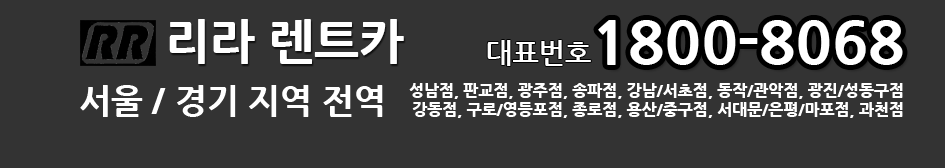
<style>
.page{position:relative;width:945px;height:168px;background:#333333}
.page>*{position:absolute;margin:0}
.t1{font:48px "NanumGothicExtraBold";color:#ffffff}
.t2{font:60px "NanumGothicExtraBold";color:#ffffff}
.t3{font:28px "NanumGothicBold";color:#ffffff}
.t4{font:34px "NanumGothicExtraBold";color:#ffffff}
.t5{font:16px "NanumGothicExtraBold";color:#ffffff}
</style>
<div class="page">
<p class="t1" style="left:169px;top:19px;width:235px;height:45px">리라 렌트카</p>
<p class="t2" style="left:598px;top:20px;width:305px;height:45px">1800-8068</p>
<p class="t3" style="left:487px;top:40px;width:104px;height:26px">대표번호</p>
<p class="t4" style="left:80px;top:85px;width:303px;height:32px">서울 / 경기 지역 전역</p>
<p class="t5" style="left:409px;top:83px;width:494px;height:35px;text-align:right">성남점, 판교점, 광주점, 송파점, 강남/서초점, 동작/관악점, 광진/성동구점<br>강동점, 구로/영등포점, 종로점, 용산/중구점, 서대문/은평/마포점, 과천점</p>
</div>
